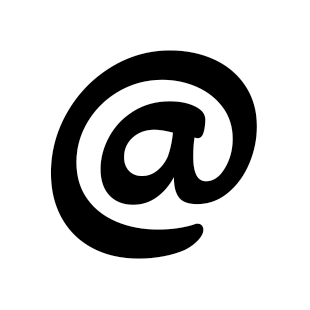
<style>
.page{position:relative;width:310px;height:310px;background:#ffffff}
.page>*{position:absolute;margin:0}
.t1{font:326.3px "AkayaTelivigala-Regular";color:#000000}
</style>
<div class="page">
<p class="t1" style="left:50px;top:50px;width:207px;height:209px">@</p>
</div>
